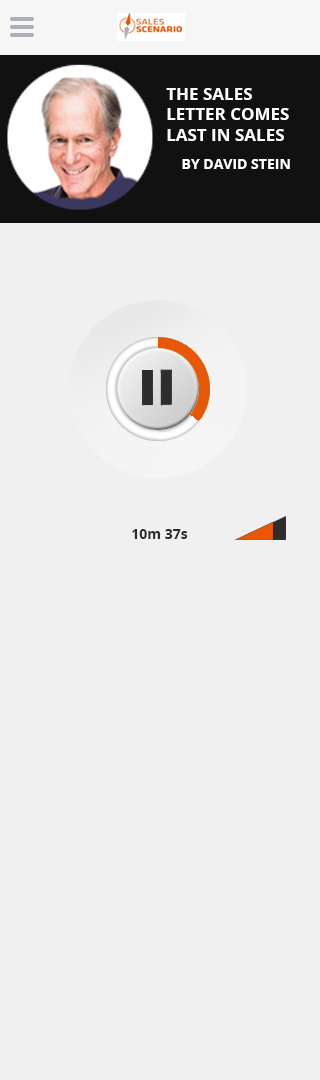
<style>
.page{position:relative;width:320px;height:1080px;background:#f0f0f0}
.page>*{position:absolute;margin:0}
.t1{font:17px "OpenSans-Bold";color:#ffffff;text-transform:uppercase}
.t2{font:14px "OpenSans-Bold";color:#ffffff;text-transform:uppercase}
.t3{font:14px "OpenSans-Bold";color:#2d2d2d}
</style>
<div class="page">
<p class="t1" style="left:166px;top:88px;width:123px;height:53px">the sales letter comes last in sales</p>
<p class="t2" style="left:182px;top:159px;width:108px;height:10px">by David stein</p>
<p class="t3" style="left:132px;top:529px;width:56px;height:10px">10m 37s</p>
</div>
